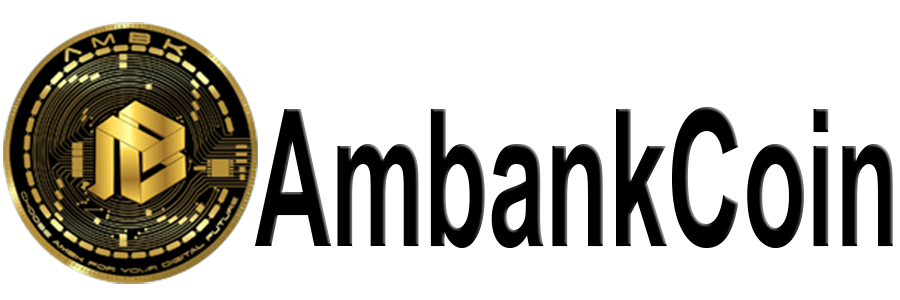
<style>
.page{position:relative;width:900px;height:300px;background:#ffffff}
.page>*{position:absolute;margin:0}
.t1{font:190.8px "Arial-BoldMT";letter-spacing:-0.01em;color:#000000;scale:0.56 1}
</style>
<div class="page">
<p class="t1" style="left:255px;top:107px;width:638px;height:141px">AmbankCoin</p>
</div>
